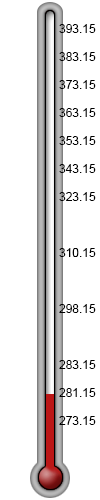
<style>
.page{position:relative;width:100px;height:500px;background:#ffffff}
.page>*{position:absolute;margin:0}
.t1{font:12px/28px "ArialMT";color:#000000}
</style>
<div class="page">
<p class="t1" style="left:59px;top:24px;width:37px;height:401px">393.15<br>383.15<br>373.15<br>363.15<br>353.15<br>343.15<br>323.15<br><br>310.15<br><br>298.15<br><br>283.15<br>281.15<br>273.15</p>
</div>
